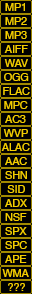
<style>
.page{position:relative;width:32px;height:294px;background:#000000}
.page>*{position:absolute;margin:0}
.t1{font:10.7px "Helvetica";color:#f2cd00}
</style>
<div class="page">
<p class="t1" style="left:5px;top:3px;width:20px;height:8px">MP1</p>
<p class="t1" style="left:5px;top:17px;width:22px;height:8px">MP2</p>
<p class="t1" style="left:5px;top:31px;width:22px;height:8px">MP3</p>
<p class="t1" style="left:4px;top:45px;width:24px;height:8px">AIFF</p>
<p class="t1" style="left:4px;top:59px;width:24px;height:8px">WAV</p>
<p class="t1" style="left:4px;top:73px;width:25px;height:8px">OGG</p>
<p class="t1" style="left:3px;top:87px;width:27px;height:8px">FLAC</p>
<p class="t1" style="left:4px;top:101px;width:24px;height:8px">MPC</p>
<p class="t1" style="left:5px;top:115px;width:21px;height:8px">AC3</p>
<p class="t1" style="left:3px;top:129px;width:25px;height:8px">WVP</p>
<p class="t1" style="left:1px;top:143px;width:29px;height:8px">ALAC</p>
<p class="t1" style="left:5px;top:157px;width:22px;height:8px">AAC</p>
<p class="t1" style="left:5px;top:171px;width:22px;height:8px">SHN</p>
<p class="t1" style="left:7px;top:185px;width:18px;height:8px">SID</p>
<p class="t1" style="left:5px;top:199px;width:22px;height:8px">ADX</p>
<p class="t1" style="left:5px;top:213px;width:22px;height:8px">NSF</p>
<p class="t1" style="left:5px;top:227px;width:22px;height:8px">SPX</p>
<p class="t1" style="left:5px;top:241px;width:22px;height:8px">SPC</p>
<p class="t1" style="left:5px;top:255px;width:22px;height:8px">APE</p>
<p class="t1" style="left:2px;top:269px;width:27px;height:8px">WMA</p>
<p class="t1" style="left:8px;top:283px;width:17px;height:8px">???</p>
</div>
